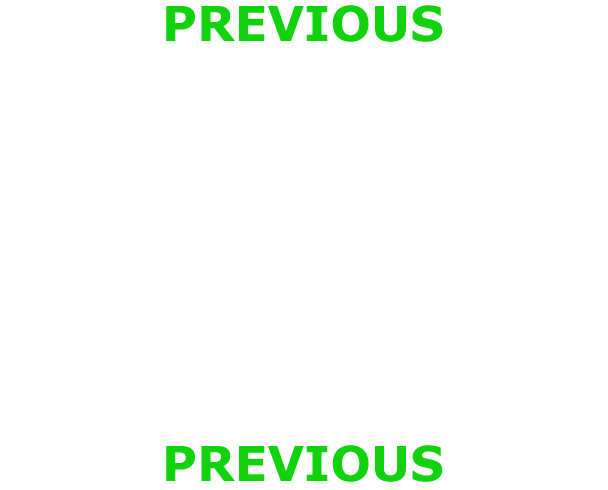
<style>
.page{position:relative;width:608px;height:490px;background:#ffffff}
.page>*{position:absolute;margin:0}
.t1{font:48px "Verdana-Bold";color:#11d20c}
</style>
<div class="page">
<p class="t1" style="left:166px;top:5px;width:277px;height:37px">PREVIOUS</p>
<p class="t1" style="left:166px;top:445px;width:277px;height:37px">PREVIOUS</p>
</div>
